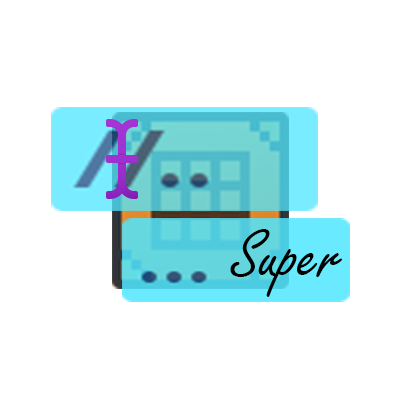
<style>
.page{position:relative;width:400px;height:400px;background:#ffffff}
.page>*{position:absolute;margin:0}
.t1{font:74.4px "FreestyleScript-Regular";color:#000000}
</style>
<div class="page">
<p class="t1" style="left:230px;top:229px;width:112px;height:68px">Super</p>
</div>
